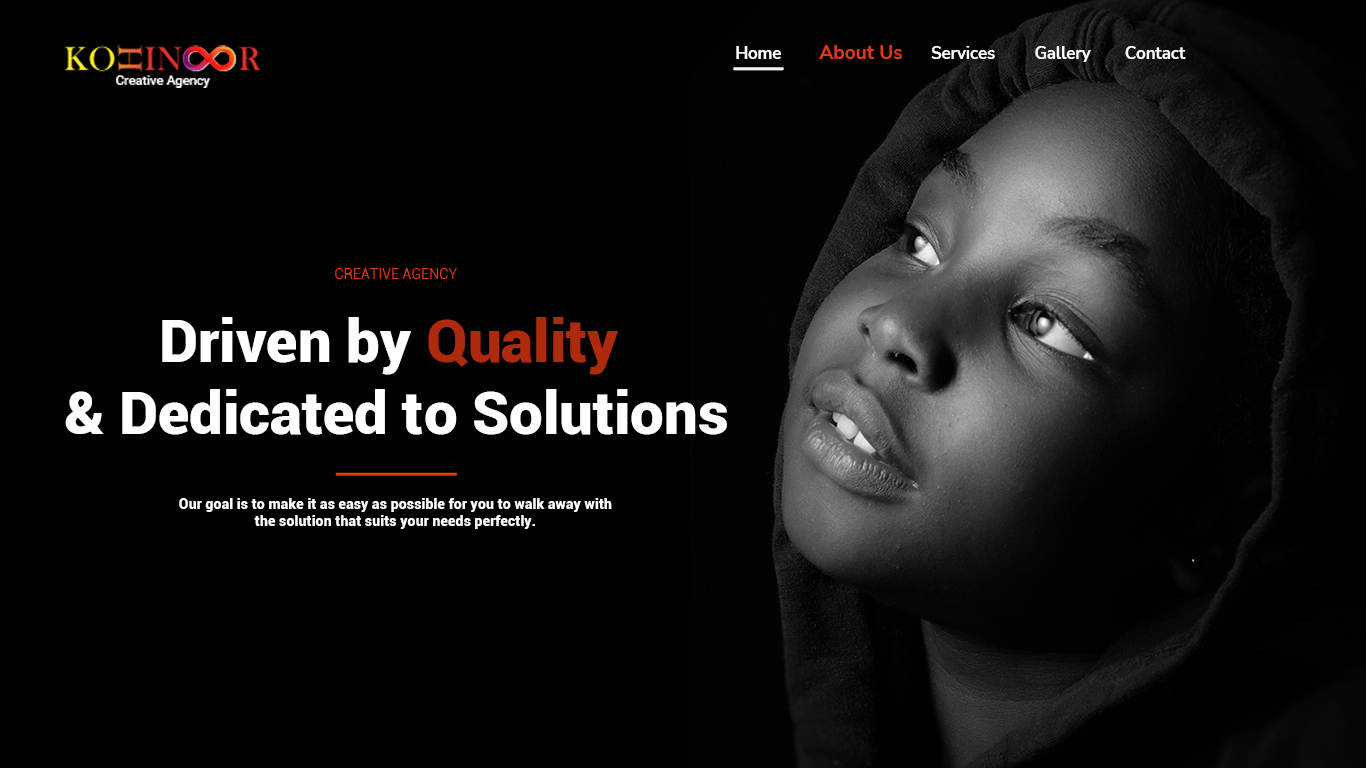
<style>
.page{position:relative;width:1366px;height:768px;background:#000000}
.page>*{position:absolute;margin:0}
.t1{font:16.6px "NunitoSans-Bold";color:#ffffff}
.t2{font:19px "NunitoSans-Bold";color:#e53814}
.t3{font:14.4px "Roboto-Light";color:#e53814}
.t4{font:59.8px "Roboto-Black";color:#ffffff}
.t5{font:59.8px "Roboto-Black";color:#ad2a0f}
.t6{font:14.4px "Roboto-Black";color:#ffffff}
</style>
<div class="page">
<p class="t1" style="left:736px;top:46px;width:45px;height:13px">Home</p>
<p class="t2" style="left:819px;top:45px;width:83px;height:14px">About Us</p>
<p class="t1" style="left:931px;top:46px;width:64px;height:13px">Services</p>
<p class="t1" style="left:1035px;top:46px;width:56px;height:16px">Gallery</p>
<p class="t1" style="left:1125px;top:46px;width:61px;height:13px">Contact</p>
<p class="t3" style="left:335px;top:268px;width:122px;height:11px">CREATIVE AGENCY</p>
<p class="t4" style="left:65px;top:317px;width:662px;height:118px;text-align:center">Driven by <span class="t5">Quality</span> <br>&amp; Dedicated to Solutions</p>
<p class="t6" style="left:179px;top:498px;width:433px;height:31px;text-align:center">Our goal is to make it as easy as possible for you to walk away with the solution that suits your needs perfectly.</p>
</div>
